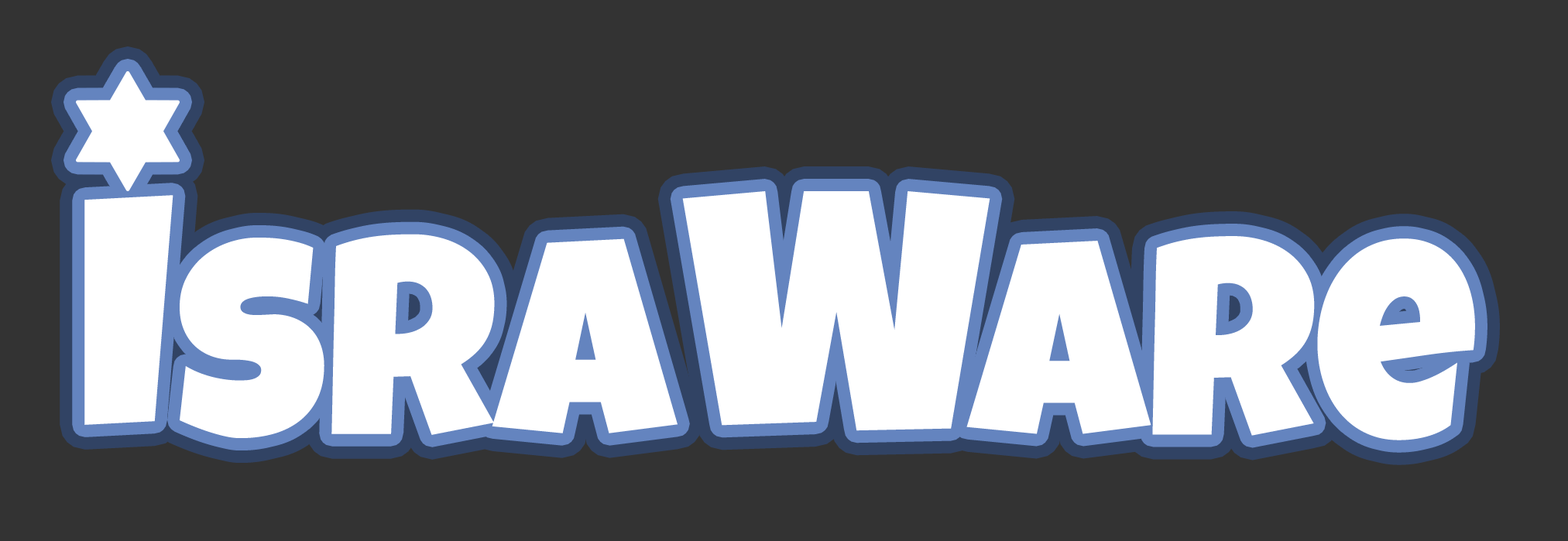
<style>
.page{position:relative;width:1568px;height:541px;background:#333333}
.page>*{position:absolute;margin:0}
.t1{font:339.8px "LuckiestGuy-Regular";color:#ffffff}
.t2{font:282px "LuckiestGuy-Regular";color:#ffffff}
.t3{font:280.3px "LuckiestGuy-Regular";color:#ffffff}
</style>
<div class="page">
<p class="t1" style="left:84px;top:195px;width:89px;height:230px">I</p>
<p class="t1" style="left:682px;top:191px;width:308px;height:240px">W</p>
<p class="t2" style="left:180px;top:234px;width:498px;height:204px">sra</p>
<p class="t3" style="left:966px;top:236px;width:509px;height:205px">are</p>
</div>
